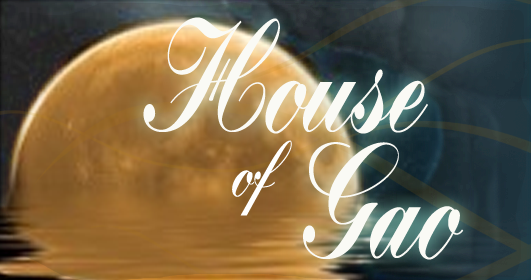
<style>
.page{position:relative;width:531px;height:280px}
.page>*{position:absolute;margin:0}
.t1{font:160px "Bolina";color:#fafaf5}
.t2{font:80px "Bolina";color:#ffffff}
.t3{font:162px "Bolina";color:#fafaf5}
</style>
<div class="page">
<p class="t1" style="left:143px;top:17px;width:285px;height:117px">House</p>
<p class="t2" style="left:232px;top:140px;width:60px;height:76px">of</p>
<p class="t3" style="left:303px;top:142px;width:161px;height:118px">Gao</p>
</div>
